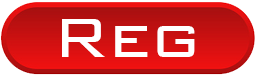
<style>
.page{position:relative;width:256px;height:76px;background:#ffffff}
.page>*{position:absolute;margin:0}
.t1{font:74px "BankGothicBT-Light";color:#ffffff}
</style>
<div class="page">
<p class="t1" style="left:62px;top:19px;width:133px;height:38px">Reg</p>
</div>
